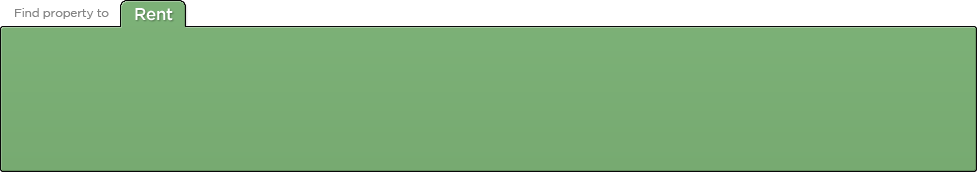
<style>
.page{position:relative;width:977px;height:172px}
.page>*{position:absolute;margin:0}
.t1{font:12px "GothamBook";letter-spacing:-0.02em;color:#858585}
.t2{font:17px "GothamMedium";letter-spacing:-0.02em;color:#ffffff}
</style>
<div class="page">
<p class="t1" style="left:15px;top:8px;width:94px;height:11px">Find property to</p>
<p class="t2" style="left:135px;top:8px;width:38px;height:13px">Rent</p>
</div>
